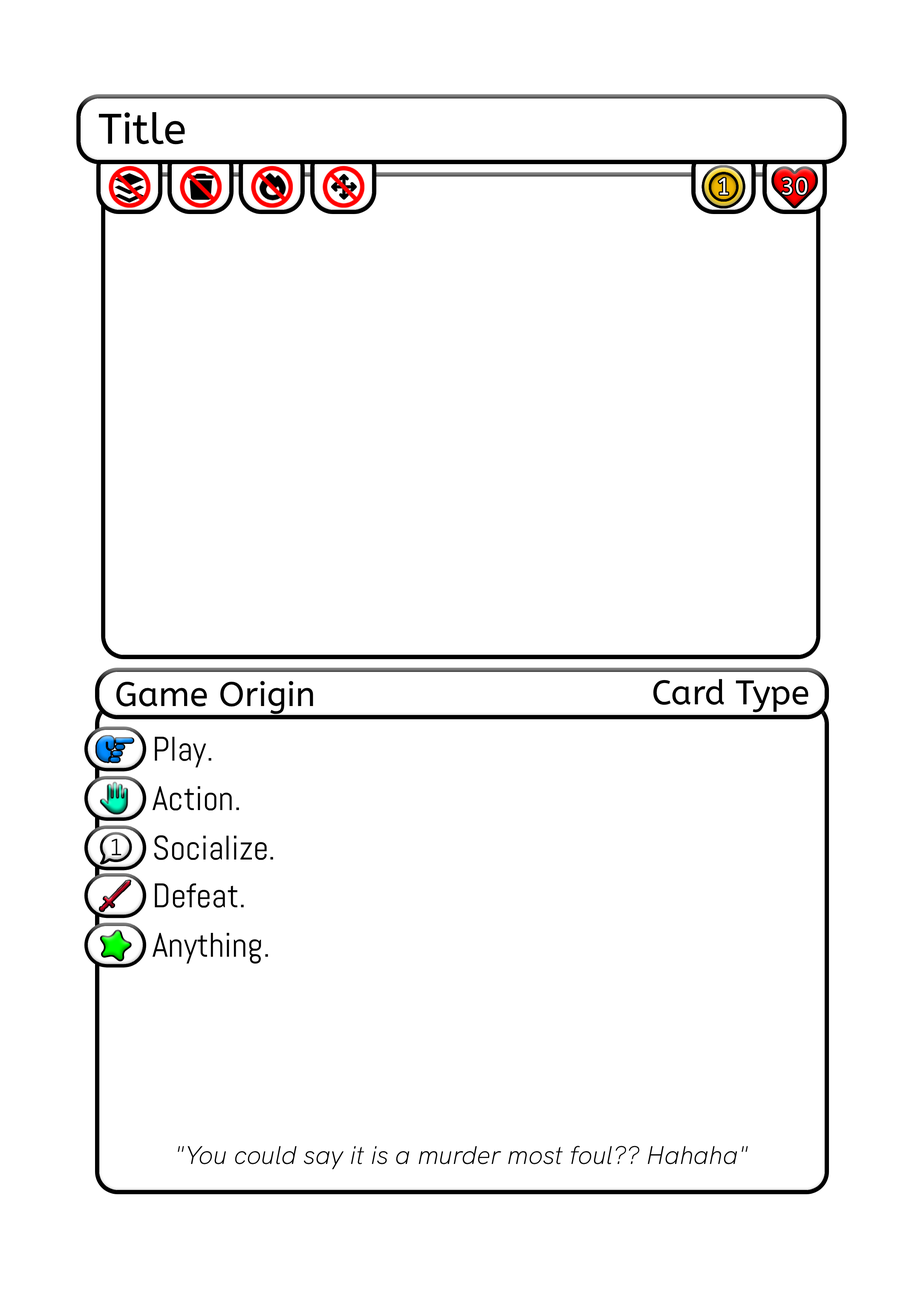
<style>
.page{position:relative;width:924px;height:1291px;background:#ffffff}
.page>*{position:absolute;margin:0}
.t1{font:42.6px "ABeeZee-Regular";color:#000000}
.t2{font:23.5px "ABeeZee-Regular";color:#ffffff}
.t3{font:34.1px "ABeeZee-Regular";color:#000000}
.t4{font:34.1px "ABeeZee-Regular";color:#ffffff}
.t5{font:34.1px "Abel-Regular";color:#000000}
.t6{font:23.4px "Abel-Regular";color:#000000}
.t7{font:25.6px "HKGrotesk-LightItalic";color:#000000}
</style>
<div class="page">
<p class="t1" style="left:99px;top:112px;width:86px;height:32px">Title</p>
<p class="t2" style="left:719px;top:178px;width:9px;height:17px">1</p>
<p class="t2" style="left:782px;top:177px;width:26px;height:18px">30</p>
<p class="t3" style="left:116px;top:680px;width:279px;height:34px">Game Origin <span class="t4">Title</span></p>
<p class="t3" style="left:653px;top:679px;width:155px;height:33px">Card Type</p>
<p class="t5" style="left:155px;top:736px;width:56px;height:32px">Play.</p>
<p class="t5" style="left:152px;top:785px;width:87px;height:25px">Action.</p>
<p class="t6" style="left:112px;top:838px;width:9px;height:17px">1</p>
<p class="t5" style="left:154px;top:835px;width:119px;height:25px">Socialize.</p>
<p class="t5" style="left:155px;top:883px;width:89px;height:24px">Defeat.</p>
<p class="t5" style="left:152px;top:932px;width:116px;height:32px">Anything.</p>
<p class="t7" style="left:178px;top:1145px;width:570px;height:24px">"You could say it is a murder most foul?? Hahaha"</p>
</div>
